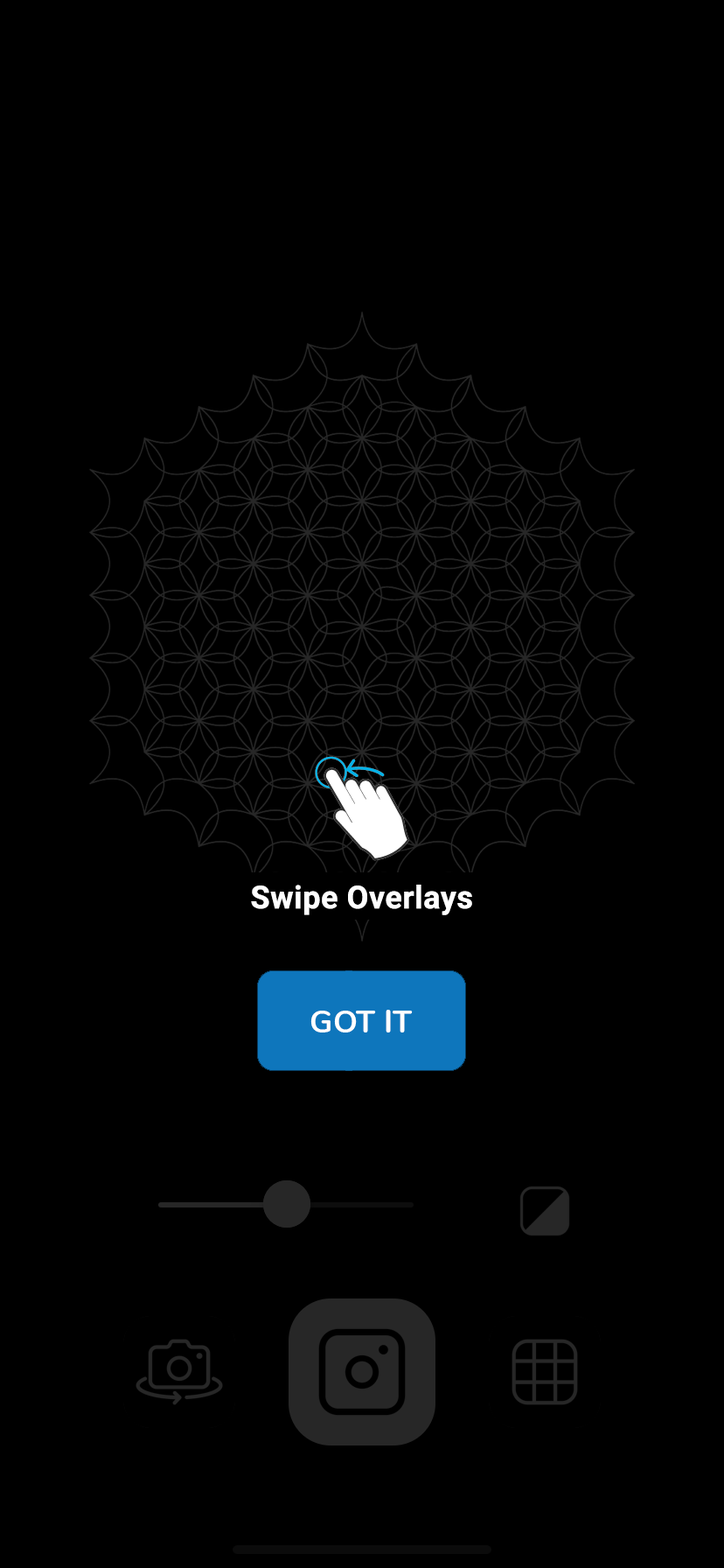
<style>
.page{position:relative;width:724px;height:1568px;background:#000000}
.page>*{position:absolute;margin:0}
.t1{font:31.5px "Roboto-Bold";letter-spacing:0.015em;color:#ffffff}
</style>
<div class="page">
<p class="t1" style="left:251px;top:885px;width:221px;height:30px">Swipe Overlays</p>
</div>
